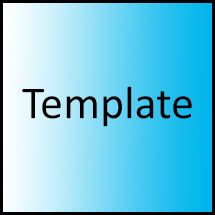
<style>
.page{position:relative;width:215px;height:215px}
.page>*{position:absolute;margin:0}
.t1{font:46px "Calibri";color:#000000}
</style>
<div class="page">
<p class="t1" style="left:22px;top:86px;width:170px;height:41px">Template</p>
</div>
